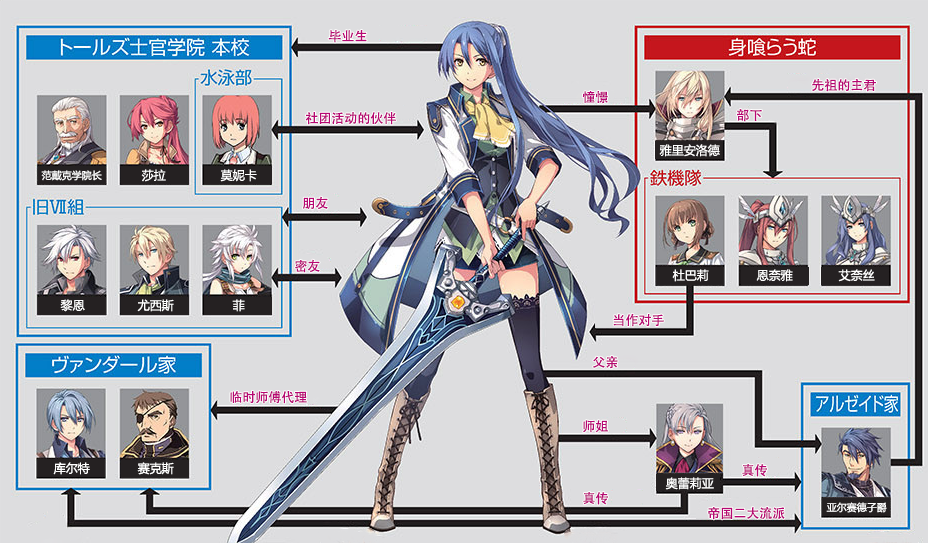
<style>
.page{position:relative;width:928px;height:543px;background:#dddddf}
.page>*{position:absolute;margin:0}
.t1{font:13px "AdobeHeitiStd-Regular";color:#b70773}
.t2{font:12px "MicrosoftYaHei";color:#ffffff}
.t3{font:10px "MicrosoftYaHei";color:#ffffff}
</style>
<div class="page">
<p class="t1" style="left:328px;top:30px;width:39px;height:13px">毕业生</p>
<p class="t1" style="left:812px;top:78px;width:64px;height:14px">先祖的主君</p>
<p class="t1" style="left:582px;top:91px;width:26px;height:13px">憧憬</p>
<p class="t1" style="left:305px;top:112px;width:91px;height:13px">社团活动的伙伴</p>
<p class="t1" style="left:737px;top:109px;width:25px;height:13px">部下</p>
<p class="t2" style="left:659px;top:144px;width:61px;height:13px">雅里安洛德</p>
<p class="t3" style="left:41px;top:170px;width:61px;height:11px">范戴克学院长</p>
<p class="t2" style="left:141px;top:169px;width:25px;height:13px">莎拉</p>
<p class="t2" style="left:220px;top:169px;width:37px;height:13px">莫妮卡</p>
<p class="t1" style="left:302px;top:196px;width:26px;height:14px">朋友</p>
<p class="t1" style="left:295px;top:259px;width:25px;height:14px">密友</p>
<p class="t2" style="left:672px;top:269px;width:37px;height:13px">杜巴莉</p>
<p class="t2" style="left:756px;top:269px;width:37px;height:13px">恩奈雅</p>
<p class="t2" style="left:838px;top:269px;width:37px;height:13px">艾奈丝</p>
<p class="t2" style="left:60px;top:299px;width:25px;height:13px">黎恩</p>
<p class="t2" style="left:137px;top:299px;width:37px;height:13px">尤西斯</p>
<p class="t2" style="left:232px;top:299px;width:13px;height:13px">菲</p>
<p class="t1" style="left:613px;top:313px;width:51px;height:14px">当作对手</p>
<p class="t1" style="left:592px;top:356px;width:26px;height:13px">父亲</p>
<p class="t1" style="left:230px;top:391px;width:77px;height:13px">临时师傅代理</p>
<p class="t1" style="left:583px;top:420px;width:25px;height:13px">师姐</p>
<p class="t2" style="left:53px;top:462px;width:37px;height:13px">库尔特</p>
<p class="t2" style="left:137px;top:462px;width:37px;height:13px">赛克斯</p>
<p class="t1" style="left:742px;top:464px;width:25px;height:13px">真传</p>
<p class="t2" style="left:665px;top:477px;width:49px;height:13px">奥蕾莉亚</p>
<p class="t1" style="left:583px;top:492px;width:25px;height:13px">真传</p>
<p class="t1" style="left:708px;top:507px;width:77px;height:13px">帝国二大流派</p>
<p class="t3" style="left:826px;top:502px;width:61px;height:11px">亚尔赛德子爵</p>
</div>
